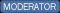
<style>
.page{position:relative;width:60px;height:13px;background:#4a6fa7}
.page>*{position:absolute;margin:0}
.t1{font:10px "FranklinGothic-Book"}
</style>
<div class="page">
<p class="t1" style="left:3px;top:3px;width:53px;height:7px">MODERATOR</p>
</div>
